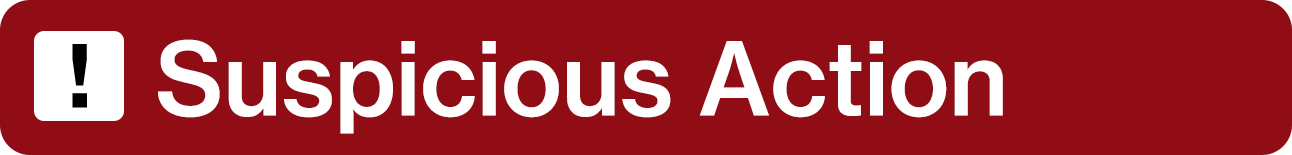
<style>
.page{position:relative;width:1292px;height:155px;background:#900d15}
.page>*{position:absolute;margin:0}
.t1{font:100px "NHaasGroteskTXPro-65Md";color:#ffffff}
</style>
<div class="page">
<p class="t1" style="left:158px;top:39px;width:845px;height:95px">Suspicious Action</p>
</div>
